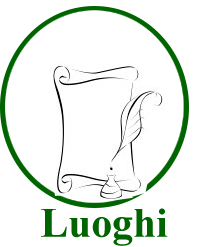
<style>
.page{position:relative;width:208px;height:247px;background:#ffffff}
.page>*{position:absolute;margin:0}
.t1{font:41.7px "TimesNewRomanPS-BoldMT";color:#006400}
</style>
<div class="page">
<p class="t1" style="left:41px;top:208px;width:127px;height:38px">Luoghi</p>
</div>
